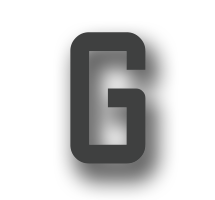
<style>
.page{position:relative;width:215px;height:200px;background:#ffffff}
.page>*{position:absolute;margin:0}
.t1{font:150px "Manteka";color:#3f4040}
</style>
<div class="page">
<p class="t1" style="left:70px;top:32px;width:76px;height:132px">G</p>
</div>
